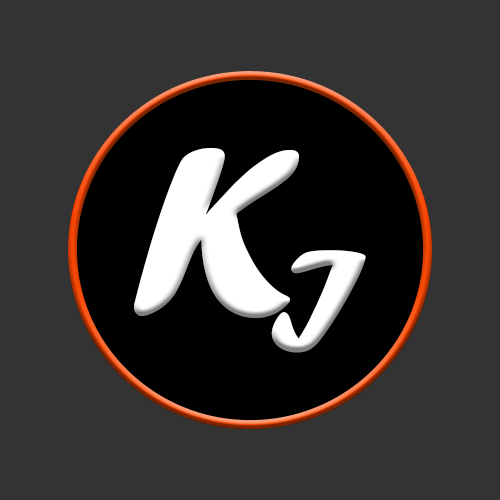
<style>
.page{position:relative;width:500px;height:500px;background:#333333}
.page>*{position:absolute;margin:0}
.t1{font:250px "ForteMT";color:#ffffff}
.t2{font:150px "ForteMT";color:#ffffff;font-style:italic}
</style>
<div class="page">
<p class="t1" style="left:134px;top:148px;width:165px;height:170px">K</p>
<p class="t2" style="left:271px;top:250px;width:95px;height:103px">I</p>
</div>
